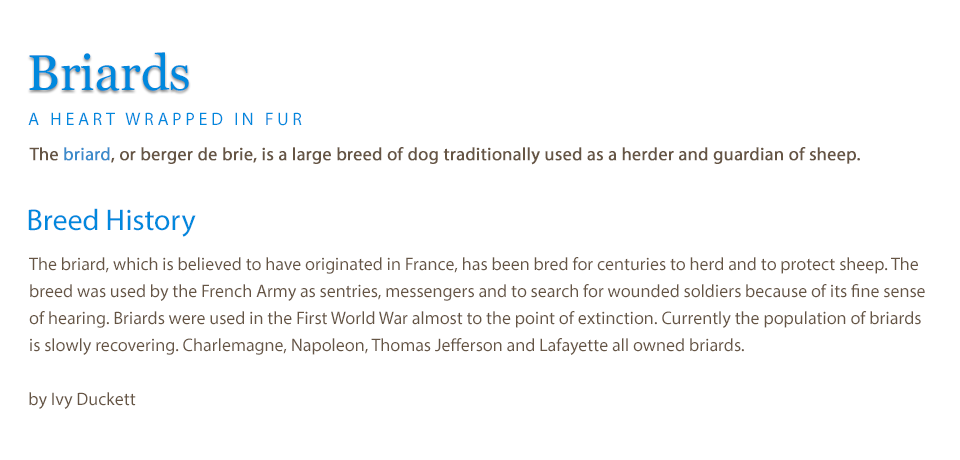
<style>
.page{position:relative;width:960px;height:460px;background:#ffffff}
.page>*{position:absolute;margin:0}
.t1{font:50px "Georgia";color:#0088dd}
.t2{font:18px "MyriadPro-Regular";letter-spacing:0.2em;color:#0088dd;text-transform:uppercase}
.t3{font:18px "MyriadPro-Regular";color:#665544;font-weight:bold}
.t4{font:18px "MyriadPro-Regular";color:#3b8bcb;font-weight:bold}
.t5{font:30px "MyriadPro-Regular";color:#0088dd}
.t6{font:18px "MyriadPro-Regular";color:#665544}
</style>
<div class="page">
<p class="t1" style="left:29px;top:52px;width:160px;height:39px">Briards</p>
<p class="t2" style="left:28px;top:112px;width:274px;height:14px">A Heart wrapped in fur</p>
<p class="t3" style="left:29px;top:147px;width:831px;height:18px">The <span class="t4">briard</span>, or berger de brie, is a large breed of dog traditionally used as a herder and guardian of sheep.</p>
<p class="t5" style="left:28px;top:208px;width:168px;height:29px">Breed History</p>
<p class="t6" style="left:29px;top:257px;width:896px;height:98px">The briard, which is believed to have originated in France, has been bred for centuries to herd and to protect sheep. The breed was used by the French Army as sentries, messengers and to search for wounded soldiers because of its fine sense of hearing. Briards were used in the First World War almost to the point of extinction. Currently the population of briards is slowly recovering. Charlemagne, Napoleon, Thomas Jefferson and Lafayette all owned briards.</p>
<p class="t6" style="left:29px;top:392px;width:107px;height:17px">by Ivy Duckett</p>
</div>
